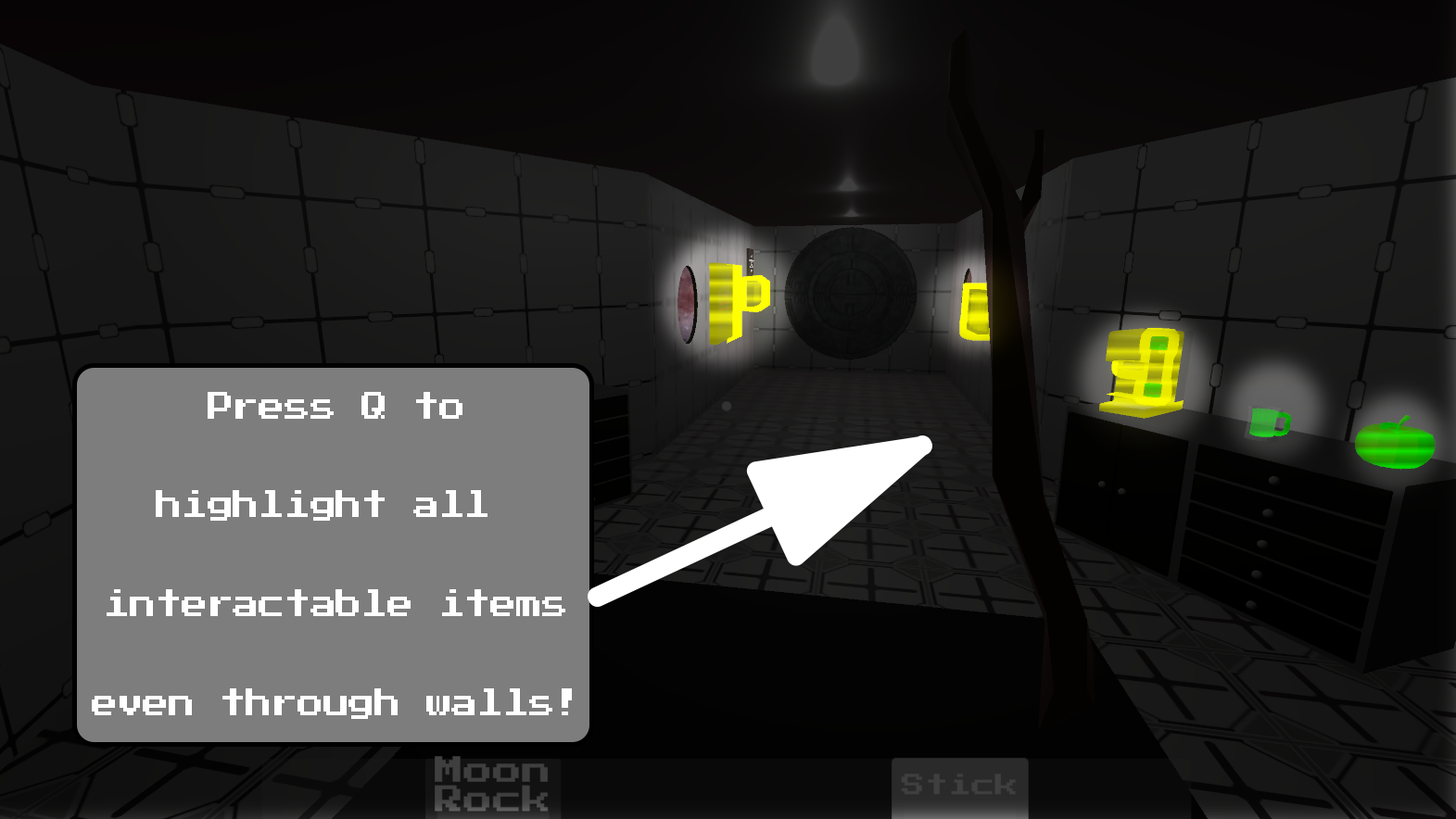
<style>
.page{position:relative;width:1456px;height:819px}
.page>*{position:absolute;margin:0}
.t1{font:30.9px/98.8px "PressStart2P-Regular";color:#ffffff;scale:0.84 1}
</style>
<div class="page">
<p class="t1" style="left:92px;top:392px;width:480px;height:327px;text-align:center">Press Q to<br>highlight all <br>interactable items<br>even through walls!</p>
</div>
